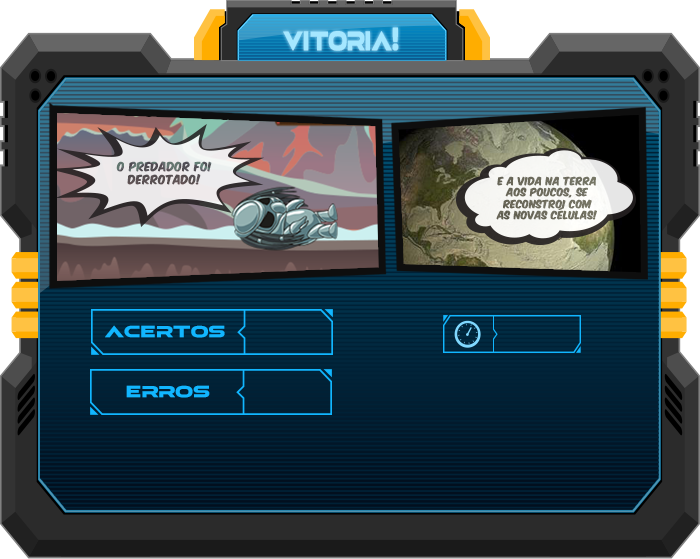
<style>
.page{position:relative;width:700px;height:559px}
.page>*{position:absolute;margin:0}
.t1{font:32.5px "elasisrg";color:#a5e7ff;font-weight:bold;scale:0.63 1}
.t2{font:10.6px "KomikaAxis";color:#5a5254;font-weight:bold}
.t3{font:9.6px "KomikaAxis";color:#6f6d5e;font-weight:bold}
.t4{font:19.5px "elasisrg";color:#11b6ff;font-weight:bold}
</style>
<div class="page">
<p class="t1" style="left:283px;top:27px;width:116px;height:24px">vitoria!</p>
<p class="t2" style="left:116px;top:161px;width:96px;height:24px;text-align:center">o predador foi<br>derrotado!</p>
<p class="t3" style="left:496px;top:176px;width:101px;height:44px;text-align:center">e a vida na terra<br>aos poucos, se<br>reconstroI com<br>as novas células!</p>
<p class="t4" style="left:105px;top:325px;width:120px;height:13px">acertos</p>
<p class="t4" style="left:126px;top:385px;width:84px;height:13px">erros</p>
</div>
